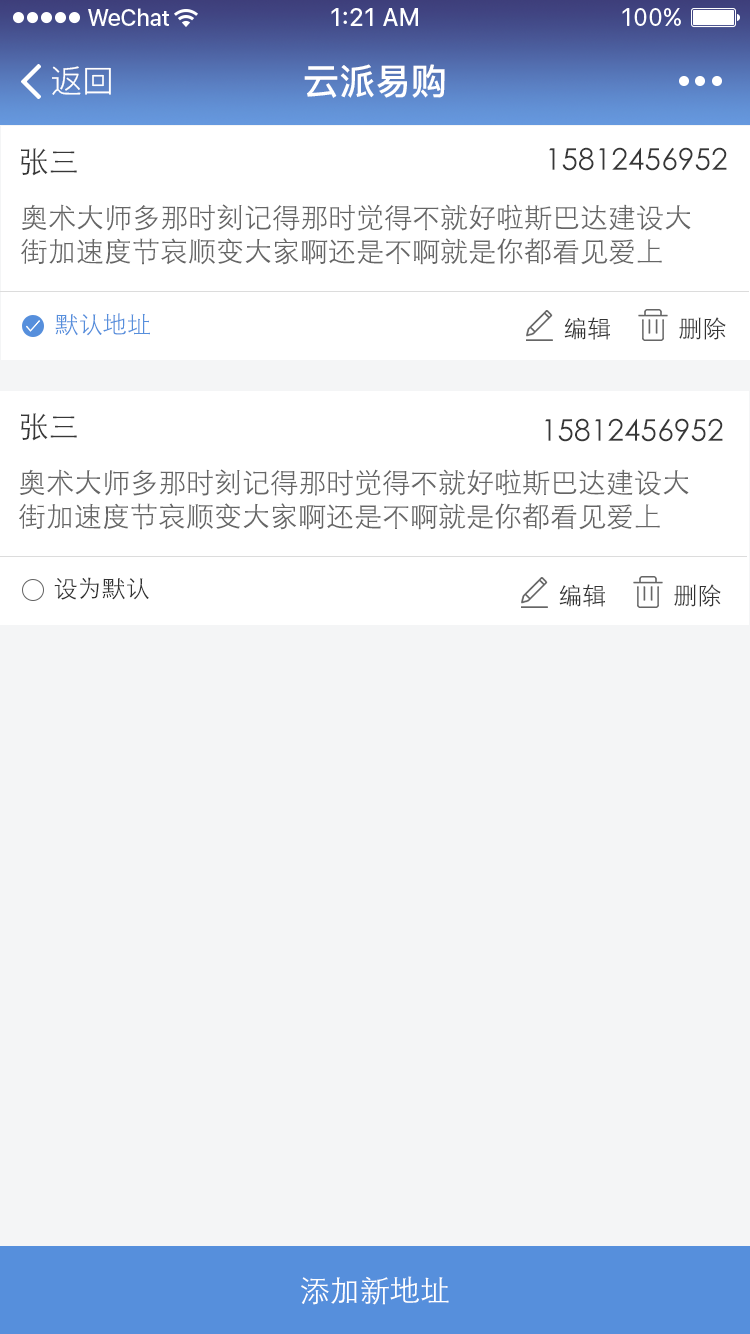
<style>
.page{position:relative;width:750px;height:1334px;background:#f4f5f6}
.page>*{position:absolute;margin:0}
.t1{font:36px "PingFang-SC-Bold";color:#ffffff}
.t2{font:32px "PingFang-SC-Regular";color:#ffffff}
.t3{font:30px "STXihei";color:#373737}
.t4{font:28px "STXihei";color:#666666}
.t5{font:24px "STXihei";color:#568fdc}
.t6{font:24px "STXihei";color:#333333}
.t7{font:30px "STXihei";color:#ffffff}
</style>
<div class="page">
<p class="t1" style="left:304px;top:64px;width:141px;height:34px">云派易购</p>
<p class="t2" style="left:52px;top:66px;width:59px;height:29px">返回</p>
<p class="t3" style="left:21px;top:148px;width:56px;height:28px">张三</p>
<p class="t3" style="left:549px;top:147px;width:178px;height:24px">15812456952</p>
<p class="t4" style="left:21px;top:204px;width:670px;height:61px">奥术大师多那时刻记得那时觉得不就好啦斯巴达建设大街加速度节哀顺变大家啊还是不啊就是你都看见爱上</p>
<p class="t5" style="left:55px;top:313px;width:95px;height:23px">默认地址</p>
<p class="t6" style="left:564px;top:317px;width:46px;height:23px">编辑</p>
<p class="t6" style="left:679px;top:317px;width:47px;height:23px">删除</p>
<p class="t3" style="left:21px;top:413px;width:56px;height:28px">张三</p>
<p class="t3" style="left:545px;top:418px;width:178px;height:24px">15812456952</p>
<p class="t4" style="left:19px;top:469px;width:670px;height:61px">奥术大师多那时刻记得那时觉得不就好啦斯巴达建设大街加速度节哀顺变大家啊还是不啊就是你都看见爱上</p>
<p class="t6" style="left:54px;top:577px;width:95px;height:23px">设为默认</p>
<p class="t6" style="left:559px;top:584px;width:46px;height:23px">编辑</p>
<p class="t6" style="left:674px;top:584px;width:47px;height:23px">删除</p>
<p class="t7" style="left:301px;top:1276px;width:148px;height:29px">添加新地址</p>
</div>
